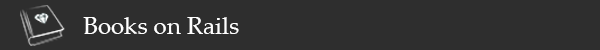
<style>
.page{position:relative;width:600px;height:50px;background:#2e2e2e}
.page>*{position:absolute;margin:0}
.t1{font:24px "PalatinoLinotype-Roman";color:#ffffff}
</style>
<div class="page">
<p class="t1" style="left:83px;top:17px;width:156px;height:17px">Books on Rails</p>
</div>
